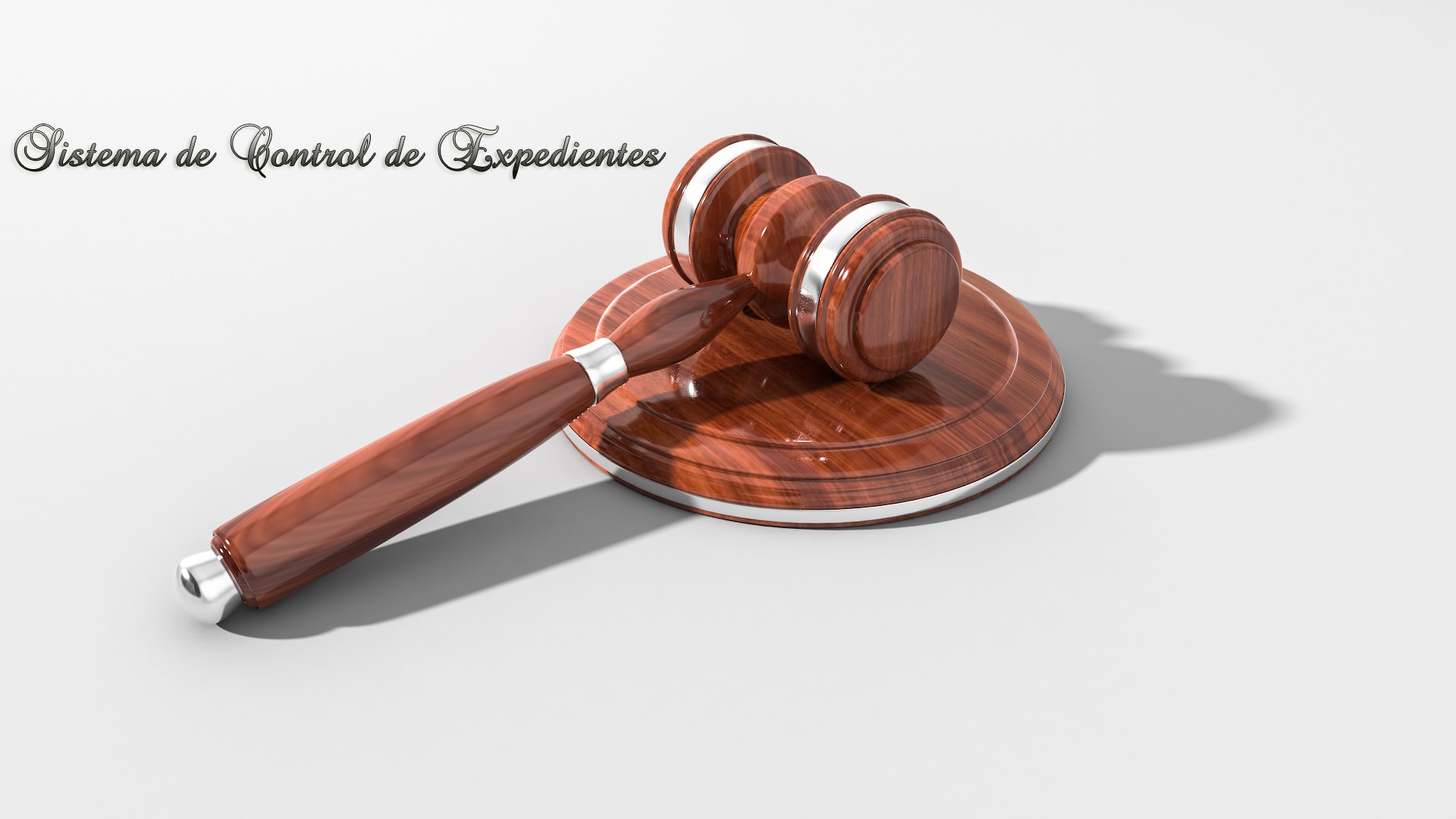
<style>
.page{position:relative;width:1456px;height:819px}
.page>*{position:absolute;margin:0}
.t1{font:45.5px "BrockScript"}
</style>
<div class="page">
<p class="t1" style="left:14px;top:124px;width:652px;height:55px">Sistema de Control de Expedientes</p>
</div>
